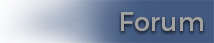
<style>
.page{position:relative;width:214px;height:43px}
.page>*{position:absolute;margin:0}
.t1{font:26px "Montserrat-Regular";color:#a1a1a1}
</style>
<div class="page">
<p class="t1" style="left:121px;top:12px;width:82px;height:19px">Forum</p>
</div>
